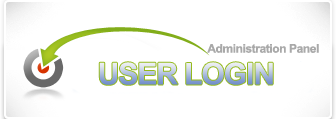
<style>
.page{position:relative;width:336px;height:119px;background:#ffffff}
.page>*{position:absolute;margin:0}
.t1{font:12px "Arial-BoldMT";letter-spacing:-0.035em;color:#a9a9a9}
.t2{font:30px "Arial-BoldMT";letter-spacing:-0.035em}
</style>
<div class="page">
<p class="t1" style="left:207px;top:44px;width:112px;height:9px">Administration Panel</p>
<p class="t2" style="left:99px;top:62px;width:174px;height:23px">USER LOGIN</p>
</div>
